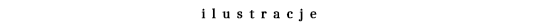
<style>
.page{position:relative;width:550px;height:25px;background:#ffffff}
.page>*{position:absolute;margin:0}
.t1{font:14px "Caladea-Regular";letter-spacing:0.1em;color:#000000;font-weight:bold}
</style>
<div class="page">
<p class="t1" style="left:201px;top:8px;width:116px;height:14px">i l u s t r a c j e</p>
</div>
